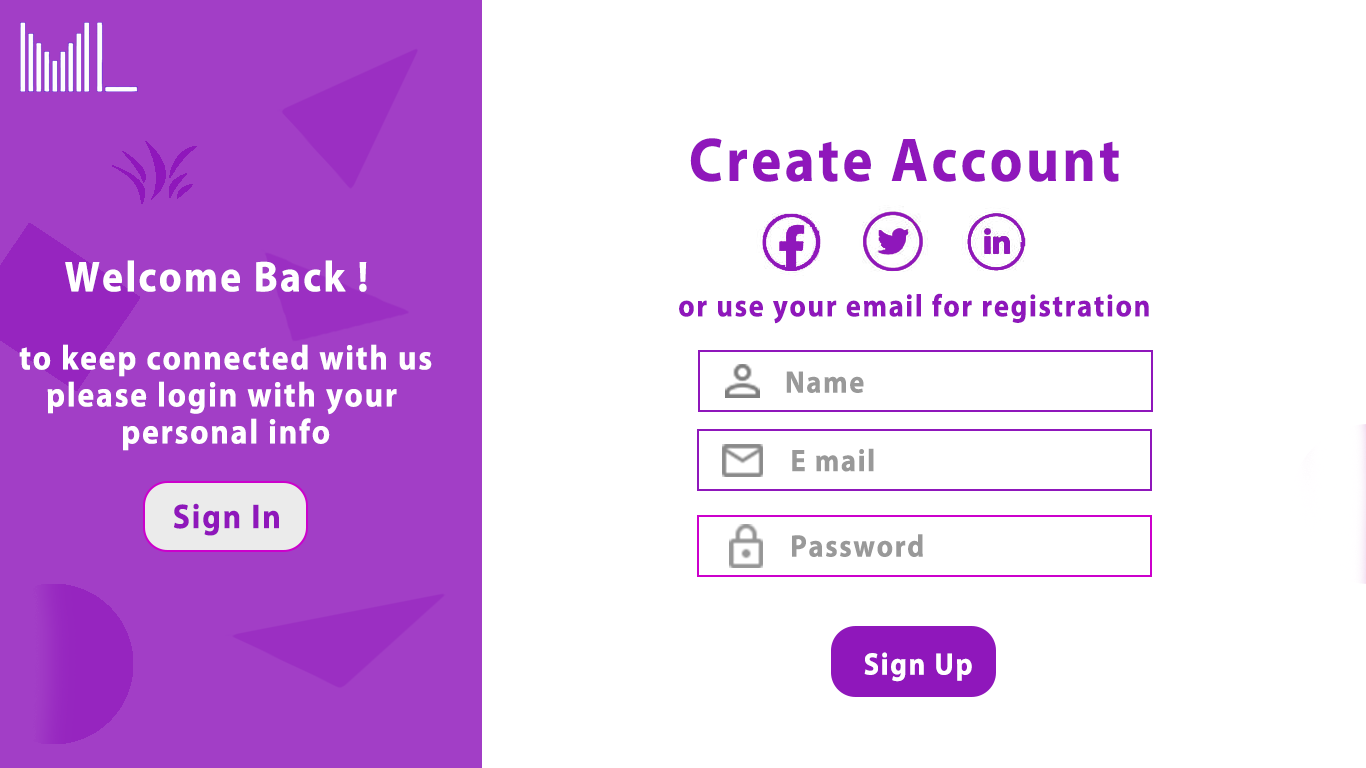
<style>
.page{position:relative;width:1366px;height:768px;background:#ffffff}
.page>*{position:absolute;margin:0}
.t1{font:62.3px "MyriadPro-Bold";letter-spacing:0.06em;color:#8f17bb;scale:0.91 1}
.t2{font:43.2px "MyriadPro-Bold";letter-spacing:0.06em;color:#ffffff;scale:0.91 1}
.t3{font:31.1px "MyriadPro-Bold";letter-spacing:0.06em;color:#8f17bb;scale:0.91 1}
.t4{font:34.6px/37px "MyriadPro-Bold";letter-spacing:0.06em;color:#ffffff;scale:0.91 1}
.t5{font:31.1px "MyriadPro-Bold";letter-spacing:0.06em;color:#999999;scale:0.91 1}
.t6{font:34.6px "MyriadPro-Bold";letter-spacing:0.06em;color:#8f17bb;scale:0.91 1}
.t7{font:31.1px "MyriadPro-Bold";letter-spacing:0.06em;color:#ffffff;scale:0.91 1}
</style>
<div class="page">
<p class="t1" style="left:690px;top:138px;width:429px;height:44px">Create Account</p>
<p class="t2" style="left:65px;top:260px;width:302px;height:32px">Welcome Back !</p>
<p class="t3" style="left:679px;top:293px;width:470px;height:31px">or use your email for registration</p>
<p class="t4" style="left:19px;top:344px;width:413px;height:107px;text-align:center">to keep connected with us<br>please login with your <br>personal info</p>
<p class="t5" style="left:786px;top:371px;width:78px;height:22px">Name</p>
<p class="t5" style="left:792px;top:448px;width:82px;height:24px">E mail</p>
<p class="t6" style="left:174px;top:503px;width:105px;height:33px">Sign In</p>
<p class="t5" style="left:792px;top:534px;width:131px;height:23px">Password</p>
<p class="t7" style="left:864px;top:652px;width:108px;height:30px">Sign Up</p>
</div>
